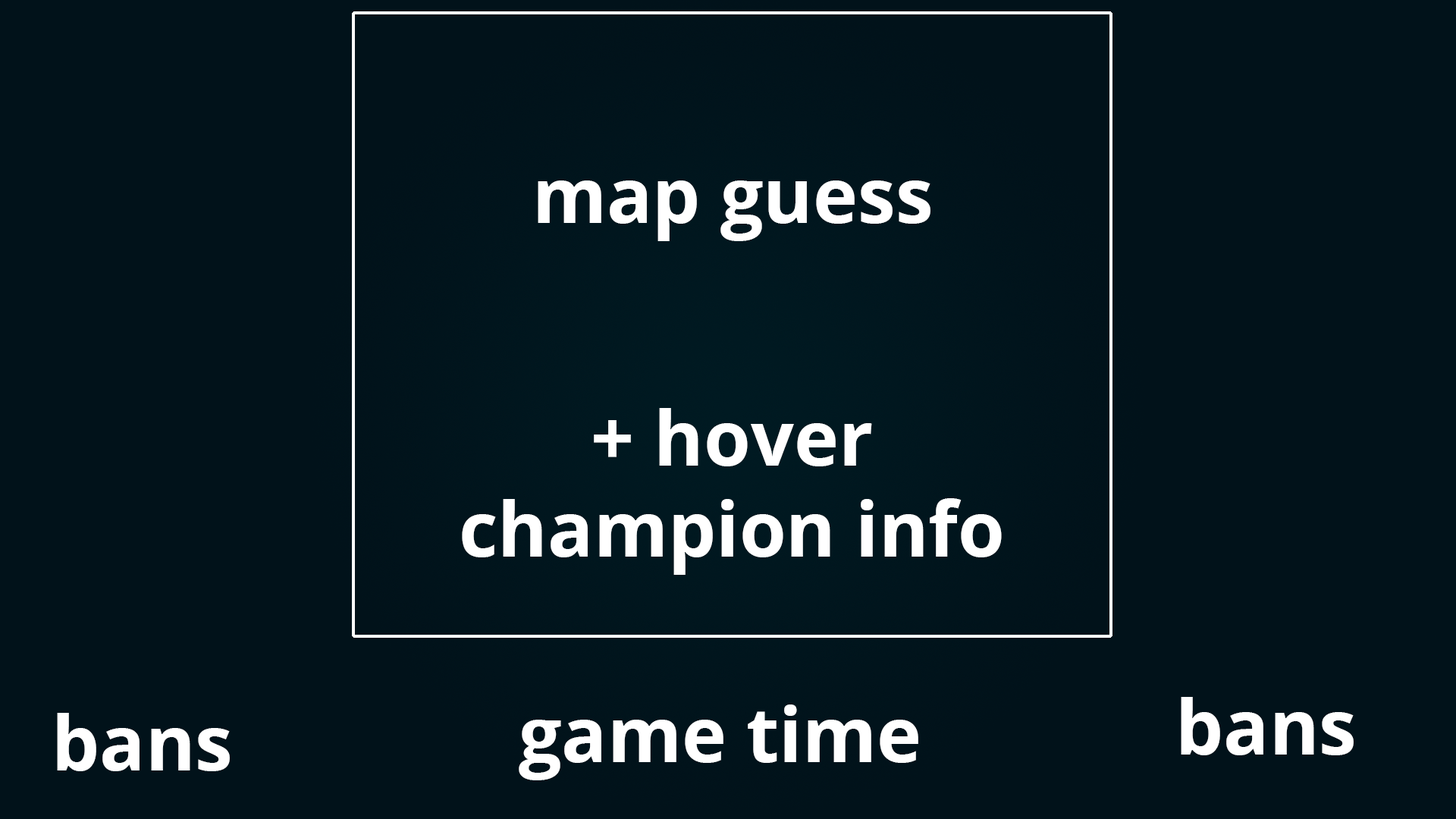
<style>
.page{position:relative;width:1456px;height:819px;background:#01121a}
.page>*{position:absolute;margin:0}
.t1{font:75.8px "OpenSans-Bold";color:#ffffff}
</style>
<div class="page">
<p class="t1" style="left:538px;top:180px;width:392px;height:61px">map guess</p>
<p class="t1" style="left:462px;top:408px;width:540px;height:167px;text-align:center">+ hover<br>champion info</p>
<p class="t1" style="left:1181px;top:697px;width:173px;height:58px">bans</p>
<p class="t1" style="left:57px;top:713px;width:173px;height:58px">bans</p>
<p class="t1" style="left:519px;top:704px;width:399px;height:76px">game time</p>
</div>
